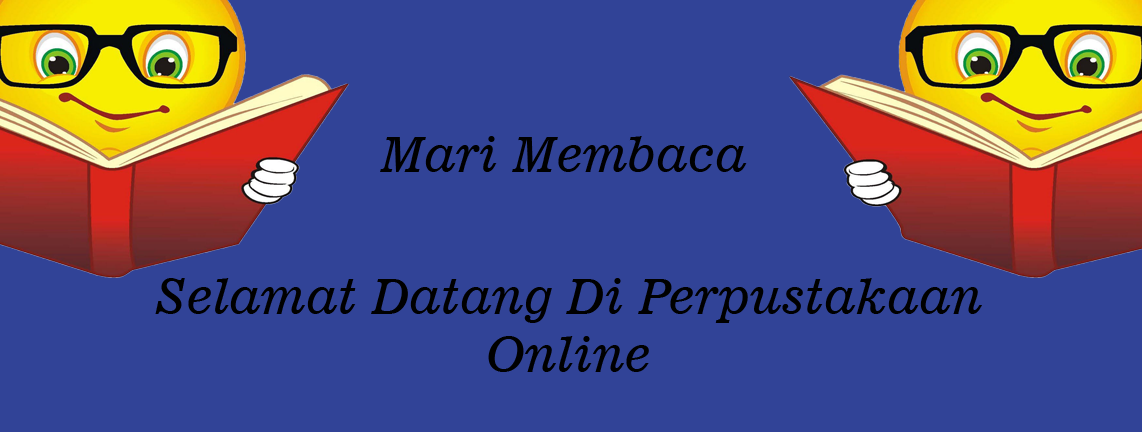
<style>
.page{position:relative;width:1142px;height:432px;background:#314397}
.page>*{position:absolute;margin:0}
.t1{font:48px "News701BT-ItalicA";color:#000000}
</style>
<div class="page">
<p class="t1" style="left:380px;top:136px;width:367px;height:36px">Mari Membaca</p>
<p class="t1" style="left:155px;top:278px;width:827px;height:94px;text-align:center">Selamat Datang Di Perpustakaan Online</p>
</div>
